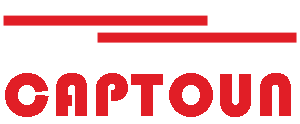
<style>
.page{position:relative;width:300px;height:124px;background:#ffffff}
.page>*{position:absolute;margin:0}
.t1{font:62.5px "Bauhaus93";letter-spacing:0.05em;color:#e11e26;font-variant:small-caps}
</style>
<div class="page">
<p class="t1" style="left:5px;top:73px;width:286px;height:44px">CAPTOUN</p>
</div>
